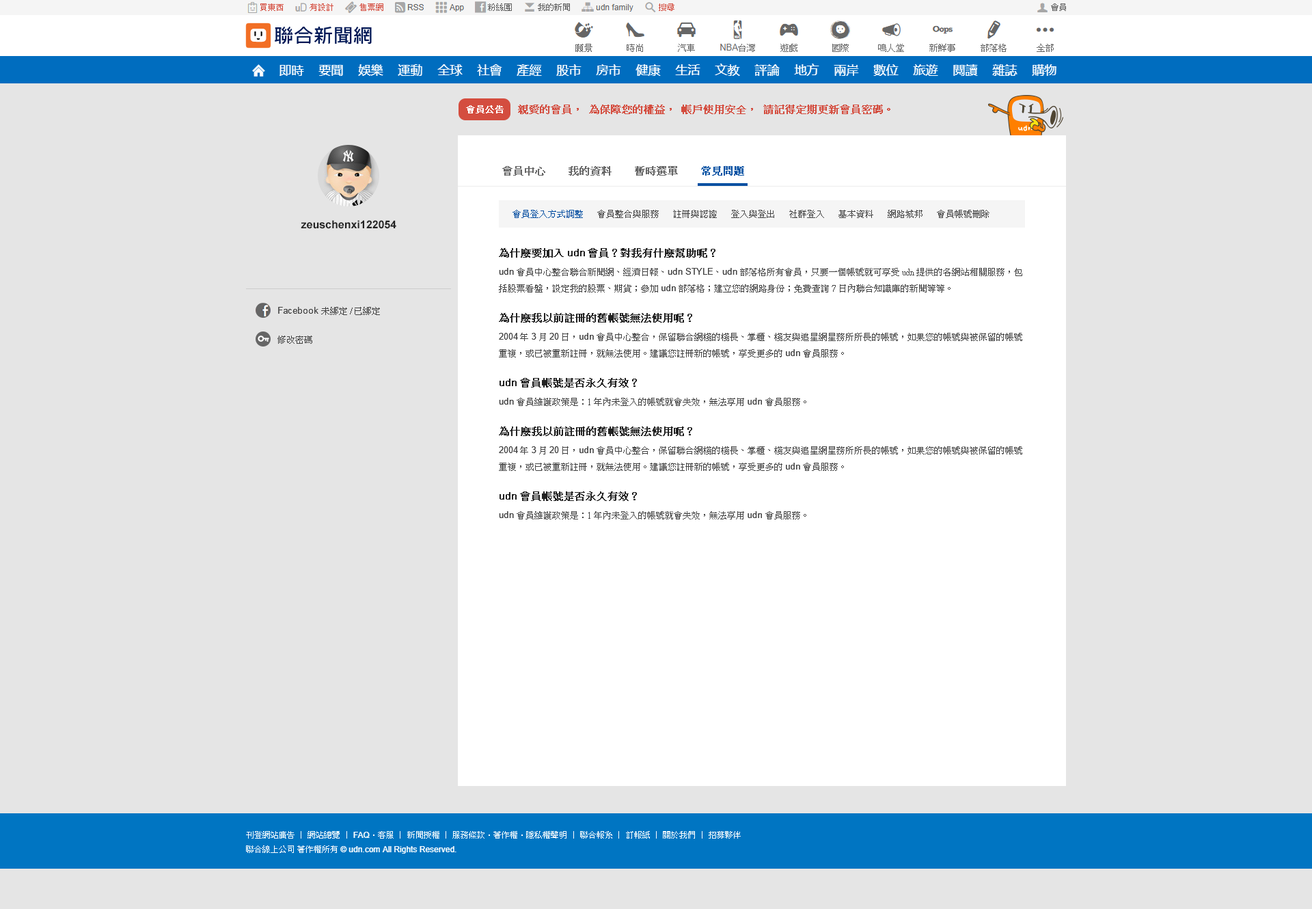
<style>
.page{position:relative;width:1312px;height:909px;background:#e5e5e5}
.page>*{position:absolute;margin:0}
.t1{font:8.9px "PMingLiU";color:#ffffff;font-weight:bold}
.t2{font:8.9px "PMingLiU";color:#ffffff}
.t3{font:10.3px "PMingLiU";color:#d44d3f;font-weight:bold}
.t4{font:10.3px "PMingLiU";color:#666666;font-weight:bold}
.t5{font:10.3px "PMingLiU";color:#0650a2;font-weight:bold}
.t6{font:10.9px "Arial-BoldMT";color:#222222}
.t7{font:10.3px "PMingLiU";color:#222222;font-weight:bold}
.t8{font:10.3px "ArialMT";color:#222222;font-weight:bold}
.t9{font:8.9px/16.4px "PMingLiU";color:#444444}
.t10{font:8.9px/16.4px "ArialMT";color:#444444}
.t11{font:8.9px "PMingLiU";color:#444444}
.t12{font:8.9px "ArialMT";color:#444444}
</style>
<div class="page">
<p class="t1" style="left:466px;top:105px;width:38px;height:8px"><span class="t2"> </span>會員公告</p>
<p class="t3" style="left:518px;top:105px;width:372px;height:9px">親愛的會員，為保障您的權益，帳戶使用安全，請記得定期更新會員密碼。</p>
<p class="t4" style="left:502px;top:166px;width:43px;height:10px">會員中心</p>
<p class="t4" style="left:569px;top:166px;width:43px;height:10px">我的資料</p>
<p class="t4" style="left:635px;top:166px;width:43px;height:10px">暫時選單</p>
<p class="t5" style="left:701px;top:166px;width:43px;height:10px">常見問題</p>
<p class="t6" style="left:301px;top:220px;width:95px;height:9px">zeuschenxi122054</p>
<p class="t7" style="left:499px;top:248px;width:216px;height:10px">為什麼要加入<span class="t8">udn</span>會員？對我有什麼幫助呢？</p>
<p class="t9" style="left:499px;top:268px;width:523px;height:24px"><span class="t10">udn </span>會員中心整合聯合新聞網、經濟日報、<span class="t10">udn STYLE</span>、<span class="t10">udn </span>部落格所有會員，只要一個帳號就可享受 udn 提供的各網站相關服務，包括股票看盤，設定我的股票、期貨；參加<span class="t10">udn </span>部落格；建立您的網路身份；免費查詢 7日內聯合知識庫的新聞等等。</p>
<p class="t11" style="left:278px;top:307px;width:102px;height:8px"><span class="t12">Facebook </span>未綁定 / 已綁定</p>
<p class="t7" style="left:499px;top:313px;width:193px;height:10px">為什麼我以前註冊的舊帳號無法使用呢？</p>
<p class="t11" style="left:277px;top:336px;width:35px;height:8px">修改密碼</p>
<p class="t9" style="left:499px;top:333px;width:523px;height:24px"><span class="t10">2004</span>年<span class="t10">3</span>月<span class="t10">20</span>日，<span class="t10">udn </span>會員中心整合，保留聯合網棧的棧長、掌櫃、棧友與追星網星務所所長的帳號，如果您的帳號與被保留的帳號重複，或已被重新註冊，就無法使用。建議您註冊新的帳號，享受更多的<span class="t10">udn </span>會員服務。</p>
<p class="t7" style="left:500px;top:378px;width:137px;height:9px"><span class="t8">udn</span>會員帳號是否永久有效？</p>
<p class="t11" style="left:499px;top:398px;width:307px;height:8px"><span class="t12">udn </span>會員維護政策是：1年內未登入的帳號就會失效，無法享用<span class="t12">udn </span>會員服務。</p>
<p class="t7" style="left:499px;top:426px;width:193px;height:10px">為什麼我以前註冊的舊帳號無法使用呢？</p>
<p class="t9" style="left:499px;top:446px;width:523px;height:25px"><span class="t10">2004</span>年<span class="t10">3</span>月<span class="t10">20</span>日，<span class="t10">udn </span>會員中心整合，保留聯合網棧的棧長、掌櫃、棧友與追星網星務所所長的帳號，如果您的帳號與被保留的帳號重複，或已被重新註冊，就無法使用。建議您註冊新的帳號，享受更多的<span class="t10">udn </span>會員服務。</p>
<p class="t7" style="left:500px;top:491px;width:137px;height:10px"><span class="t8">udn</span>會員帳號是否永久有效？</p>
<p class="t11" style="left:499px;top:511px;width:307px;height:8px"><span class="t12">udn </span>會員維護政策是：1年內未登入的帳號就會失效，無法享用<span class="t12">udn </span>會員服務。</p>
</div>
